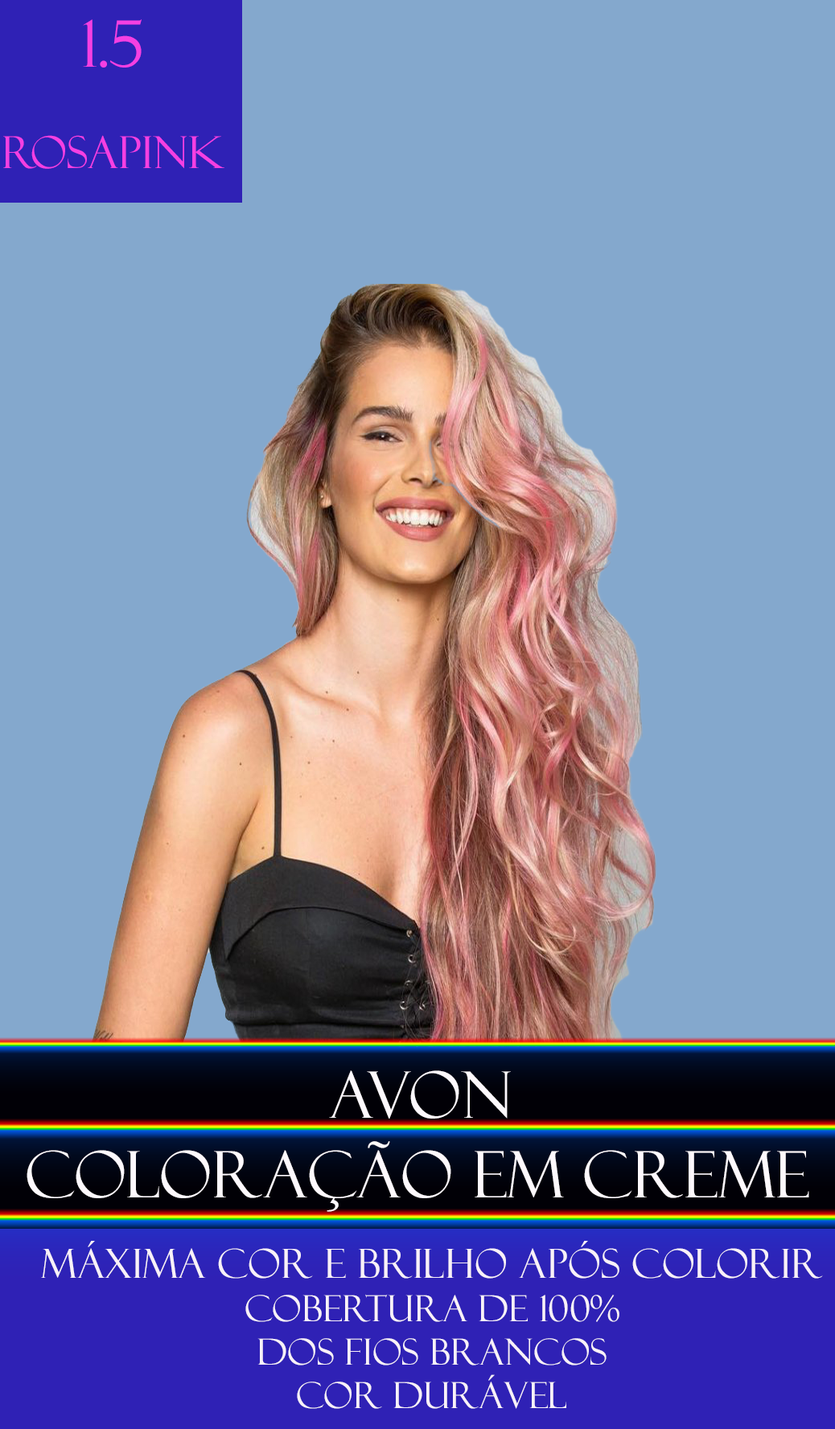
<style>
.page{position:relative;width:835px;height:1429px;background:#84a8cd}
.page>*{position:absolute;margin:0}
.t1{font:44.2px "FelixTitlingMT";color:#f53fe2}
.t2{font:64.3px "FelixTitlingMT";color:#f53fe2}
.t3{font:64.3px "FelixTitlingMT";color:#fef9fd}
.t4{font:36.2px "FelixTitlingMT";color:#f9f1f8}
.t5{font:40.2px "FelixTitlingMT";color:#f9f1f8}
</style>
<div class="page">
<p class="t1" style="left:3px;top:19px;width:221px;height:150px;text-align:center"><span class="t2">1.5<br><br><br><br><br><br></span>RosaPink</p>
<p class="t3" style="left:329px;top:1070px;width:182px;height:48px">Avon</p>
<p class="t3" style="left:27px;top:1141px;width:782px;height:71px">COLORAÇÃO EM CREME</p>
<p class="t4" style="left:41px;top:1241px;width:782px;height:168px;text-align:center"><span class="t5">Máxima Cor e Brilho após colorir<br></span>COBERTURA DE 100%<br>DOS FIOS BRANCOS<br>COR DURÁVEL</p>
</div>
